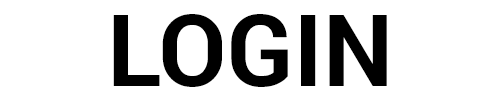
<style>
.page{position:relative;width:500px;height:100px;background:#ffffff}
.page>*{position:absolute;margin:0}
.t1{font:100px "Roboto-Bold";color:#000000}
</style>
<div class="page">
<p class="t1" style="left:113px;top:14px;width:274px;height:73px">LOGIN</p>
</div>
